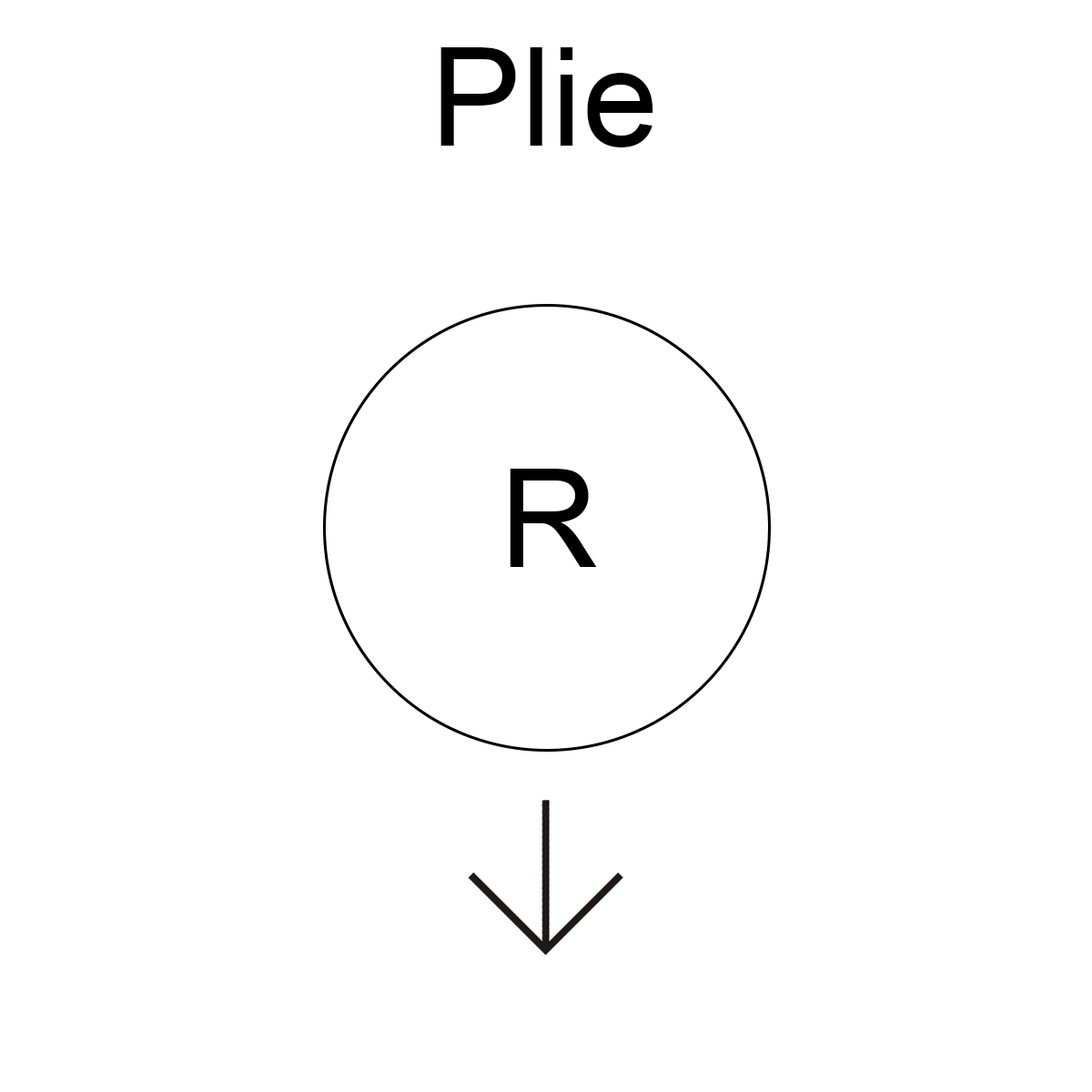
<style>
.page{position:relative;width:1092px;height:1092px;background:#ffffff}
.page>*{position:absolute;margin:0}
.t1{font:136.5px "ArialMT";color:#000000}
</style>
<div class="page">
<p class="t1" style="left:440px;top:47px;width:213px;height:100px">Plie</p>
<p class="t1" style="left:510px;top:469px;width:87px;height:98px">R</p>
</div>
